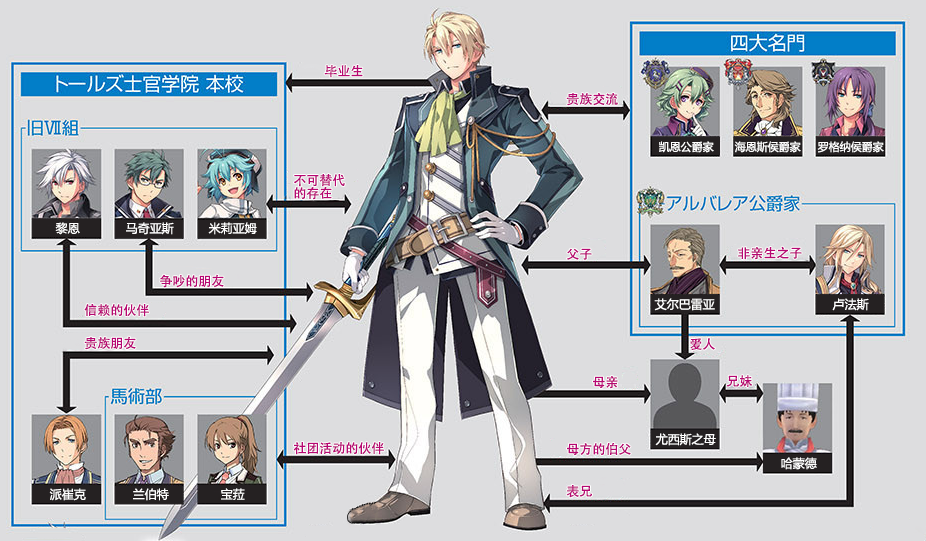
<style>
.page{position:relative;width:926px;height:541px;background:#dddddf}
.page>*{position:absolute;margin:0}
.t1{font:13px "AdobeHeitiStd-Regular";color:#b70773}
.t2{font:11px "MicrosoftYaHei";color:#ffffff}
.t3{font:13px/13px "AdobeHeitiStd-Regular";color:#b70773}
.t4{font:12px "MicrosoftYaHei";color:#ffffff}
</style>
<div class="page">
<p class="t1" style="left:324px;top:65px;width:39px;height:13px">毕业生</p>
<p class="t1" style="left:566px;top:92px;width:52px;height:14px">贵族交流</p>
<p class="t2" style="left:659px;top:141px;width:55px;height:12px">凯恩公爵家</p>
<p class="t2" style="left:734px;top:141px;width:67px;height:12px">海恩斯侯爵家</p>
<p class="t2" style="left:817px;top:141px;width:67px;height:12px">罗格纳侯爵家</p>
<p class="t3" style="left:294px;top:174px;width:51px;height:26px">不可替代<br>的存在</p>
<p class="t4" style="left:55px;top:222px;width:25px;height:13px">黎恩</p>
<p class="t4" style="left:126px;top:222px;width:48px;height:13px">马奇亚斯</p>
<p class="t4" style="left:208px;top:222px;width:49px;height:13px">米莉亚姆</p>
<p class="t1" style="left:738px;top:246px;width:64px;height:14px">非亲生之子</p>
<p class="t1" style="left:566px;top:248px;width:26px;height:12px">父子</p>
<p class="t1" style="left:160px;top:274px;width:64px;height:14px">争吵的朋友</p>
<p class="t1" style="left:84px;top:304px;width:65px;height:13px">信赖的伙伴</p>
<p class="t4" style="left:654px;top:298px;width:61px;height:13px">艾尔巴雷亚</p>
<p class="t4" style="left:832px;top:298px;width:37px;height:13px">卢法斯</p>
<p class="t1" style="left:84px;top:336px;width:52px;height:14px">贵族朋友</p>
<p class="t1" style="left:690px;top:338px;width:25px;height:12px">爱人</p>
<p class="t1" style="left:593px;top:376px;width:25px;height:13px">母亲</p>
<p class="t1" style="left:726px;top:375px;width:26px;height:12px">兄妹</p>
<p class="t4" style="left:655px;top:433px;width:61px;height:13px">尤西斯之母</p>
<p class="t1" style="left:293px;top:442px;width:91px;height:13px">社团活动的伙伴</p>
<p class="t1" style="left:567px;top:443px;width:64px;height:13px">母方的伯父</p>
<p class="t4" style="left:781px;top:457px;width:36px;height:13px">哈蒙德</p>
<p class="t1" style="left:566px;top:485px;width:26px;height:13px">表兄</p>
<p class="t4" style="left:49px;top:488px;width:37px;height:13px">派崔克</p>
<p class="t4" style="left:133px;top:488px;width:36px;height:13px">兰伯特</p>
<p class="t4" style="left:221px;top:488px;width:24px;height:12px">宝菈</p>
</div>
